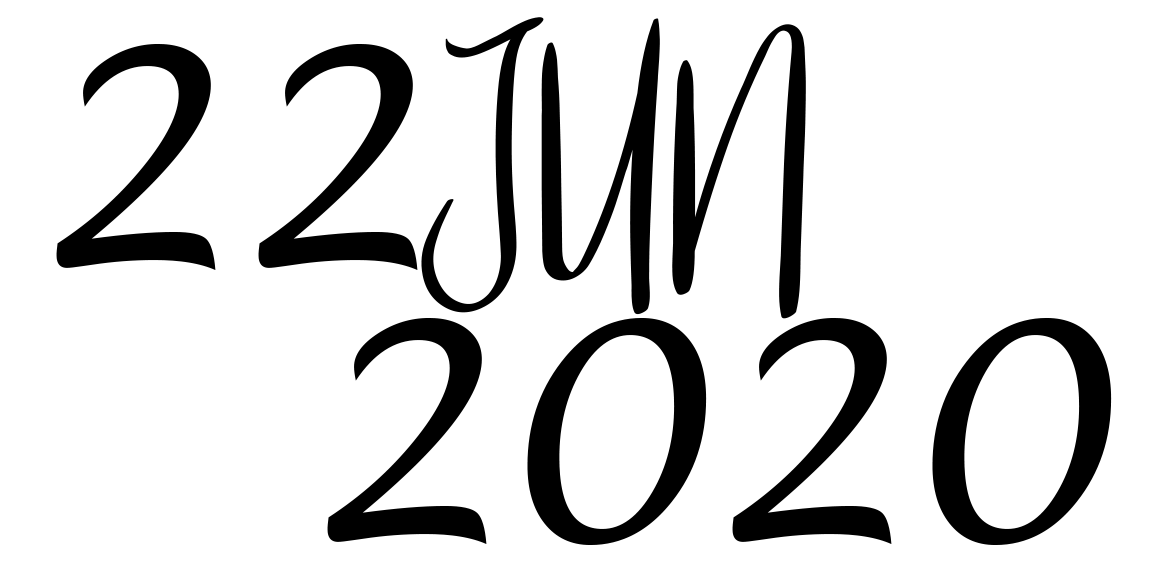
<style>
.page{position:relative;width:1173px;height:575px;background:#ffffff}
.page>*{position:absolute;margin:0}
.t1{font:300px "BecauseOfYouDemoRegular";color:#000000}
.t2{font:300px "LucidaHandwriting-Italic";color:#000000}
</style>
<div class="page">
<p class="t1" style="left:56px;top:17px;width:750px;height:302px"><span class="t2">22</span>JUN</p>
<p class="t2" style="left:327px;top:317px;width:785px;height:228px">2020</p>
</div>
